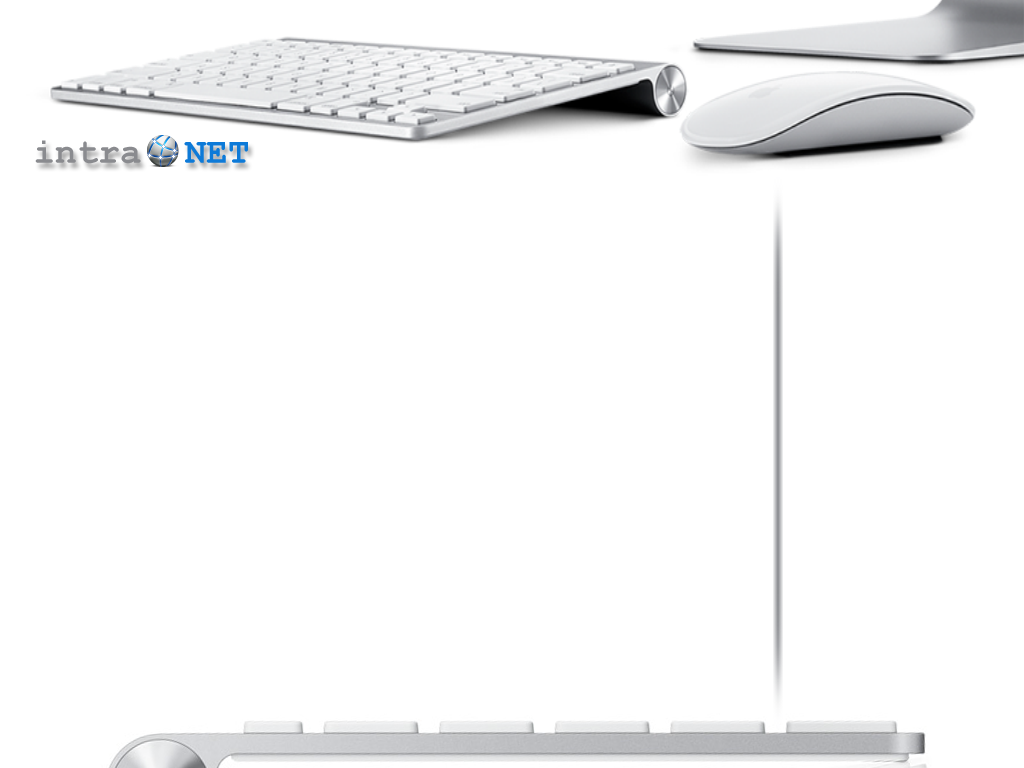
<style>
.page{position:relative;width:1024px;height:768px;background:#ffffff}
.page>*{position:absolute;margin:0}
.t1{font:36px "CourierNewPS-BoldMT";color:#8a8b8f}
.t2{font:36px "CourierNewPS-BoldMT";color:#b8bab8}
.t3{font:36px "CourierNewPS-BoldMT";color:#0d7ad8}
</style>
<div class="page">
<p class="t1" style="left:35px;top:140px;width:213px;height:24px"><span class="t2"><br></span>intra  <span class="t3">NET</span></p>
</div>
